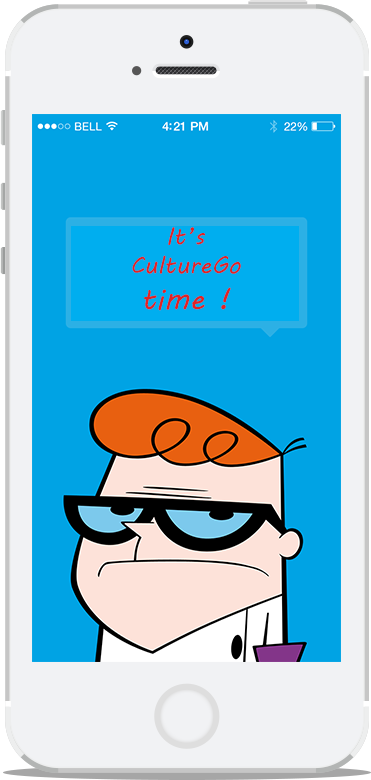
<style>
.page{position:relative;width:371px;height:780px;background:#f1f2f4}
.page>*{position:absolute;margin:0}
.t1{font:24px "MVBoli";color:#e12323}
.t2{font:30px "MVBoli";color:#e12323}
</style>
<div class="page">
<p class="t1" style="left:132px;top:227px;width:109px;height:84px;text-align:center">It’s<br>CultureGo<br><span class="t2">time !</span></p>
</div>
